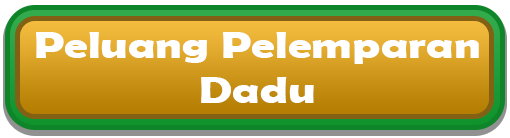
<style>
.page{position:relative;width:510px;height:138px}
.page>*{position:absolute;margin:0}
.t1{font:37.5px "BerlinSansFBDemi-Bold";color:#ffffff;scale:1.25 1}
</style>
<div class="page">
<p class="t1" style="left:36px;top:32px;width:443px;height:71px;text-align:center">Peluang Pelemparan<br>Dadu</p>
</div>
